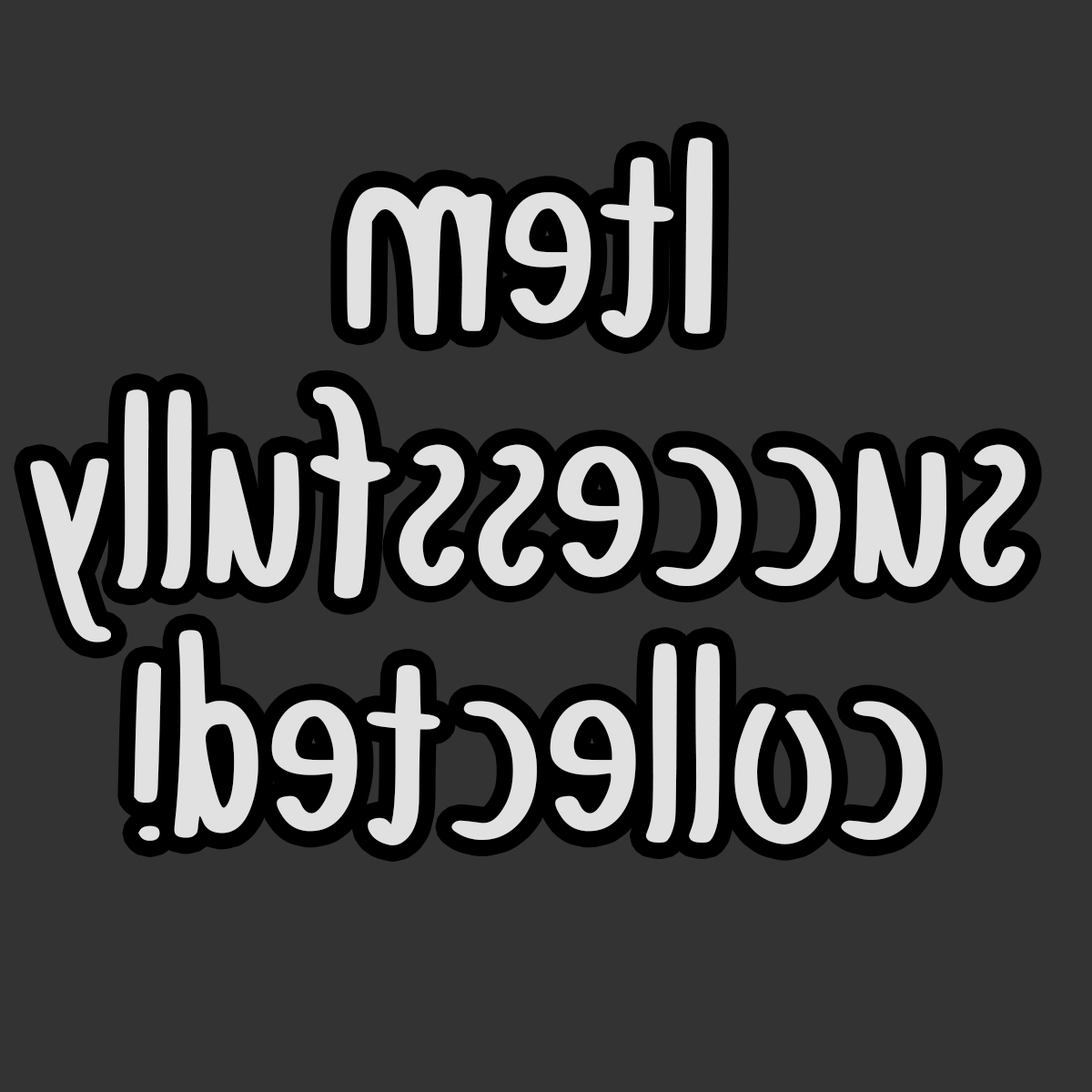
<style>
.page{position:relative;width:1092px;height:1092px;background:#333333}
.page>*{position:absolute;margin:0}
.t1{font:384.4px/254px "JustForFun-Regular";color:#e1e1e1;scale:0.69 1}
</style>
<div class="page">
<p class="t1" style="left:30px;top:137px;width:996px;height:708px;text-align:center;rotate:180deg">Item<br>successfully<br>collected!</p>
</div>
